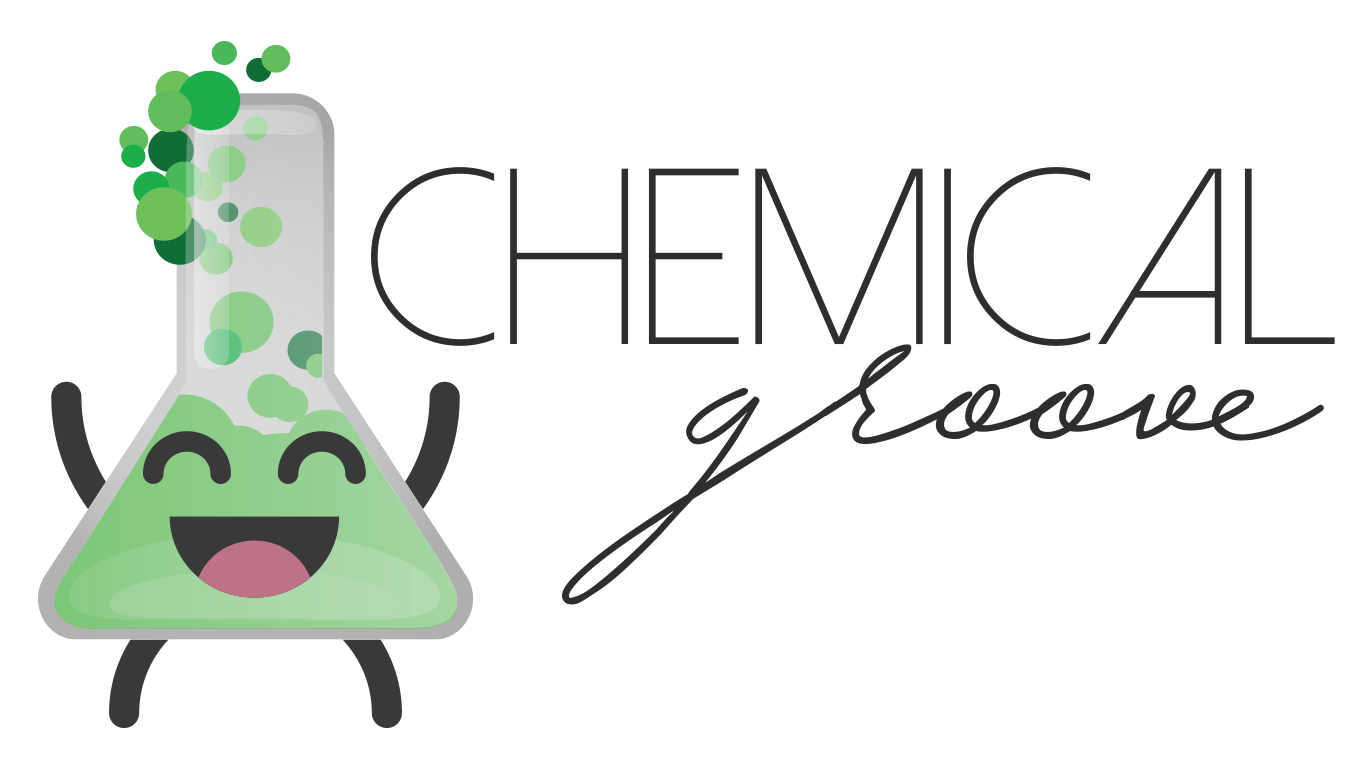
<style>
.page{position:relative;width:1366px;height:768px;background:#ffffff}
.page>*{position:absolute;margin:0}
.t1{font:250px "DolceVitaLight";color:#2e2e2e}
.t2{font:250px "HijrnotesPERSONALUSEONLY";color:#2e2e2e}
</style>
<div class="page">
<p class="t1" style="left:371px;top:167px;width:964px;height:179px">Chemical</p>
<p class="t2" style="left:562px;top:344px;width:762px;height:261px">groove</p>
</div>
